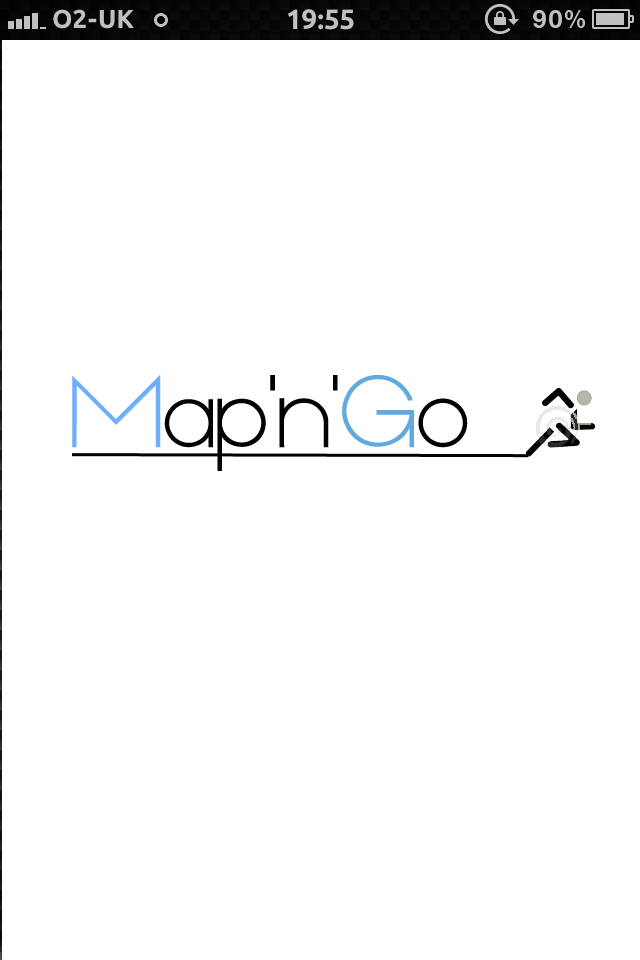
<style>
.page{position:relative;width:640px;height:960px;background:#ffffff}
.page>*{position:absolute;margin:0}
.t1{font:72px "Origin-Regular";color:#000000}
.t2{font:72px "Origin-Regular";color:#6faff8}
.t3{font:72px "Origin-Regular";color:#62a9e0}
.t4{font:72px "Origin-Regular";color:#010101}
</style>
<div class="page">
<p class="t1" style="left:72px;top:375px;width:396px;height:96px"><span class="t2">M</span>ap’n’<span class="t3">G</span><span class="t4">o</span></p>
</div>
